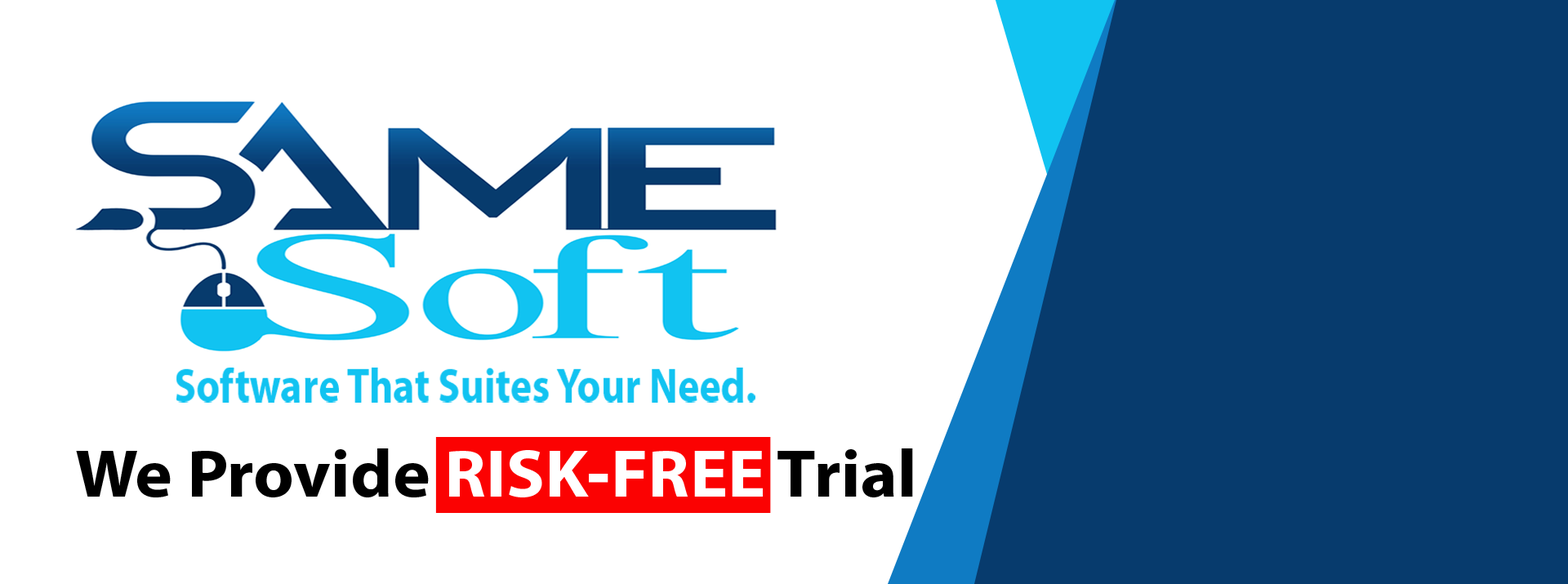
<style>
.page{position:relative;width:1568px;height:584px;background:#ffffff}
.page>*{position:absolute;margin:0}
.t1{font:47.6px "MyriadHebrew-Bold";color:#11c3f1;scale:0.87 1}
.t2{font:67.3px "MyriadHebrew-Bold";color:#000000;scale:1.05 1}
.t3{font:67.3px "MyriadHebrew-Bold";color:#ffffff;scale:1.05 1}
</style>
<div class="page">
<p class="t1" style="left:176px;top:368px;width:579px;height:35px">Software That Suites Your Need.</p>
<p class="t2" style="left:76px;top:448px;width:837px;height:49px">We Provide <span class="t3">RISK-FREE</span> Trial</p>
</div>
